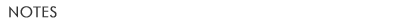
<style>
.page{position:relative;width:400px;height:24px;background:#ffffff}
.page>*{position:absolute;margin:0}
.t1{font:14.7px "FuturaBT-Light";letter-spacing:0.025em;color:#363636;text-transform:uppercase;font-weight:bold}
</style>
<div class="page">
<p class="t1" style="left:9px;top:6px;width:48px;height:12px">notes</p>
</div>
